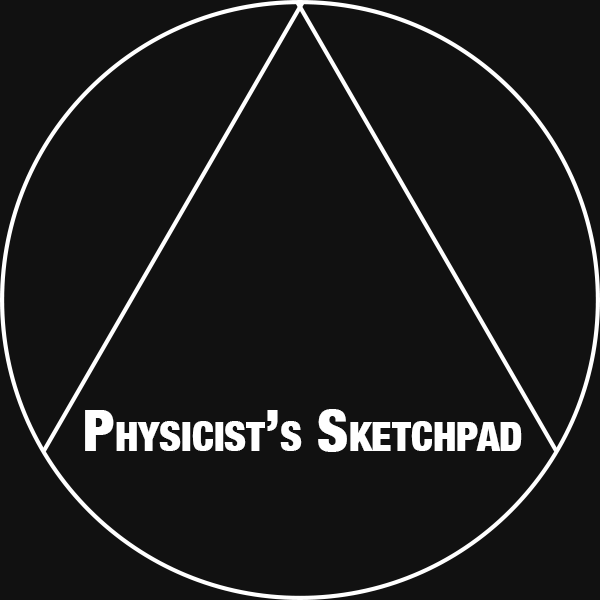
<style>
.page{position:relative;width:600px;height:600px;background:#111111}
.page>*{position:absolute;margin:0}
.t1{font:58.3px "HelveticaNeue-CondensedBlack";color:#ffffff;font-variant:small-caps}
</style>
<div class="page">
<p class="t1" style="left:85px;top:409px;width:437px;height:43px">Physicist’s Sketchpad</p>
</div>
